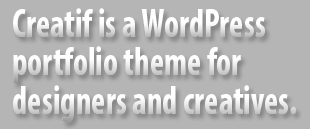
<style>
.page{position:relative;width:310px;height:129px;background:#b5b5b5}
.page>*{position:absolute;margin:0}
.t1{font:41.3px "MyriadPro-BoldCond";color:#ffffff;scale:0.83 1}
</style>
<div class="page">
<p class="t1" style="left:13px;top:8px;width:283px;height:114px">Creatif is a WordPress<br>portfolio theme for<br>designers and creatives.</p>
</div>
